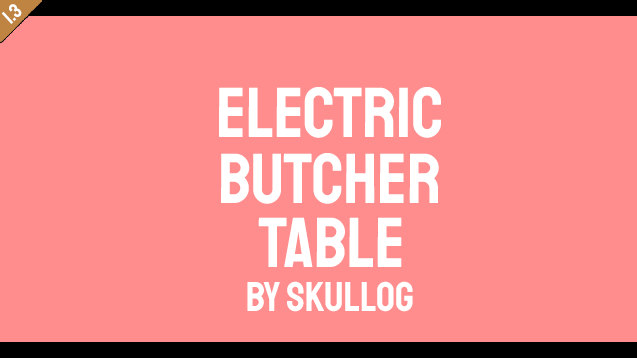
<style>
.page{position:relative;width:637px;height:358px;background:#ff8d8d}
.page>*{position:absolute;margin:0}
.t1{font:20.3px "Staatliches-Regular";color:#ffffff;text-transform:uppercase}
.t2{font:70.8px "Staatliches-Regular";color:#ffffff}
.t3{font:70.8px "Staatliches-Regular";color:#ffffff;text-transform:uppercase}
.t4{font:41.7px "Staatliches-Regular";color:#ffffff;text-transform:uppercase}
</style>
<div class="page">
<p class="t1" style="left:1px;top:4px;width:21px;height:20px;rotate:-42deg">1.3</p>
<p class="t2" style="left:219px;top:87px;width:222px;height:51px">ELECTRIC</p>
<p class="t2" style="left:221px;top:153px;width:218px;height:51px">Butcher</p>
<p class="t3" style="left:258px;top:217px;width:144px;height:50px">Table</p>
<p class="t4" style="left:247px;top:281px;width:166px;height:31px">By SkullOG</p>
</div>
